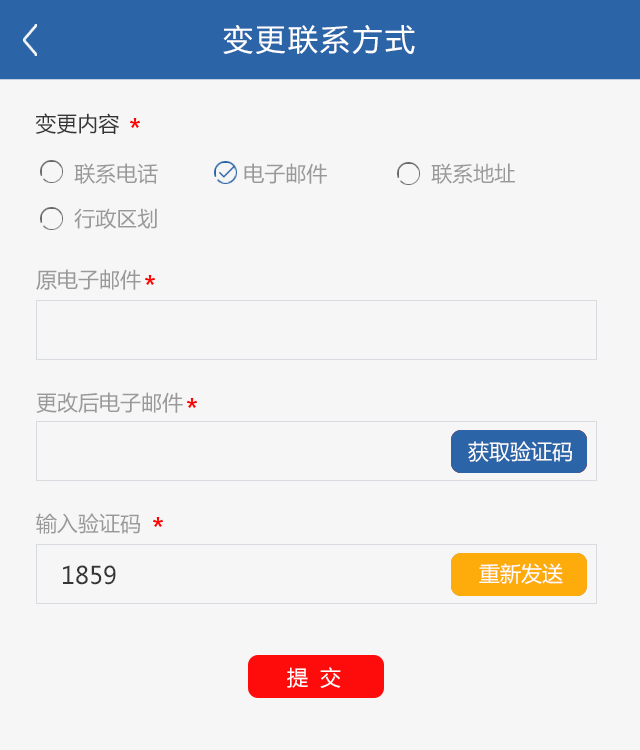
<style>
.page{position:relative;width:640px;height:750px;background:#f6f6f6}
.page>*{position:absolute;margin:0}
.t1{font:30px "MicrosoftYaHei";letter-spacing:0.08em;color:#ffffff}
.t2{font:21px "MicrosoftYaHei";color:#353535}
.t3{font:21px "MicrosoftYaHei";color:#999999}
.t4{font:21px "MicrosoftYaHei";color:#ffffff}
.t5{font:24px "MicrosoftYaHei";color:#353535}
.t6{font:21px "MicrosoftYaHei";letter-spacing:0.14em;color:#ffffff}
</style>
<div class="page">
<p class="t1" style="left:223px;top:25px;width:192px;height:29px">变更联系方式</p>
<p class="t2" style="left:35px;top:113px;width:85px;height:21px">变更内容</p>
<p class="t3" style="left:74px;top:163px;width:84px;height:21px">联系电话</p>
<p class="t3" style="left:244px;top:163px;width:83px;height:21px">电子邮件</p>
<p class="t3" style="left:431px;top:163px;width:84px;height:21px">联系地址</p>
<p class="t3" style="left:74px;top:208px;width:83px;height:21px">行政区划</p>
<p class="t3" style="left:36px;top:269px;width:105px;height:21px">原电子邮件</p>
<p class="t3" style="left:36px;top:392px;width:147px;height:21px">更改后电子邮件</p>
<p class="t4" style="left:468px;top:441px;width:104px;height:21px">获取验证码</p>
<p class="t3" style="left:36px;top:513px;width:104px;height:21px">输入验证码</p>
<p class="t5" style="left:63px;top:565px;width:53px;height:20px">1859</p>
<p class="t4" style="left:479px;top:563px;width:84px;height:21px">重新发送</p>
<p class="t6" style="left:287px;top:667px;width:54px;height:21px">提 交</p>
</div>
